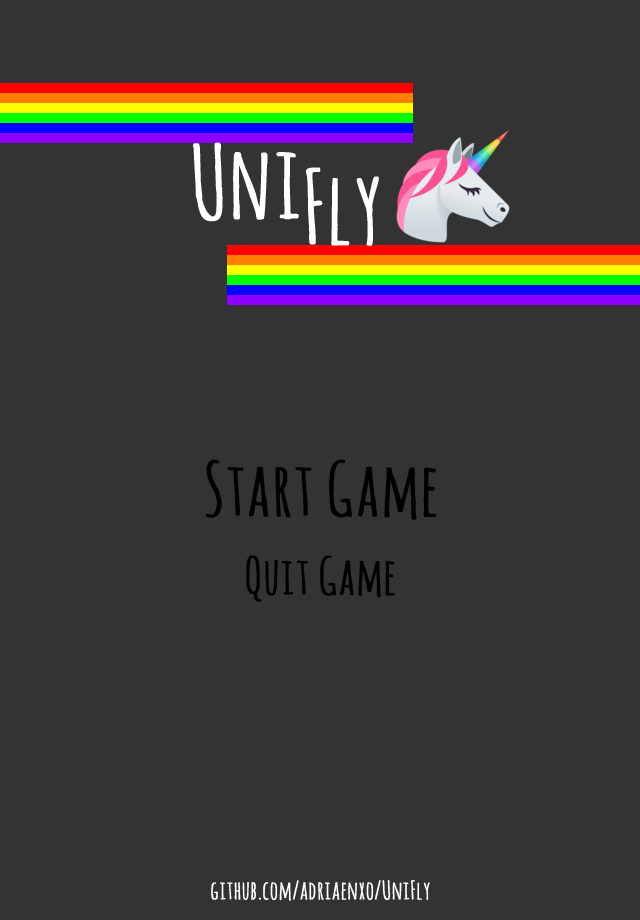
<style>
.page{position:relative;width:640px;height:920px;background:#333333}
.page>*{position:absolute;margin:0}
.t1{font:100px "AmaticSC-Regular";color:#ffffff;font-weight:bold}
.t2{font:72px "AmaticSC-Regular";color:#000000;font-weight:bold}
.t3{font:50px "AmaticSC-Regular";color:#000000;font-weight:bold}
.t4{font:25px "AmaticSC-Regular";color:#ffffff;font-weight:bold}
</style>
<div class="page">
<p class="t1" style="left:193px;top:142px;width:106px;height:80px">Uni</p>
<p class="t1" style="left:306px;top:167px;width:73px;height:79px">Fly</p>
<p class="t2" style="left:205px;top:459px;width:232px;height:61px">Start Game</p>
<p class="t3" style="left:246px;top:555px;width:149px;height:47px">Quit Game</p>
<p class="t4" style="left:211px;top:879px;width:219px;height:22px">github.com/adriaenxo/UniFly</p>
</div>
